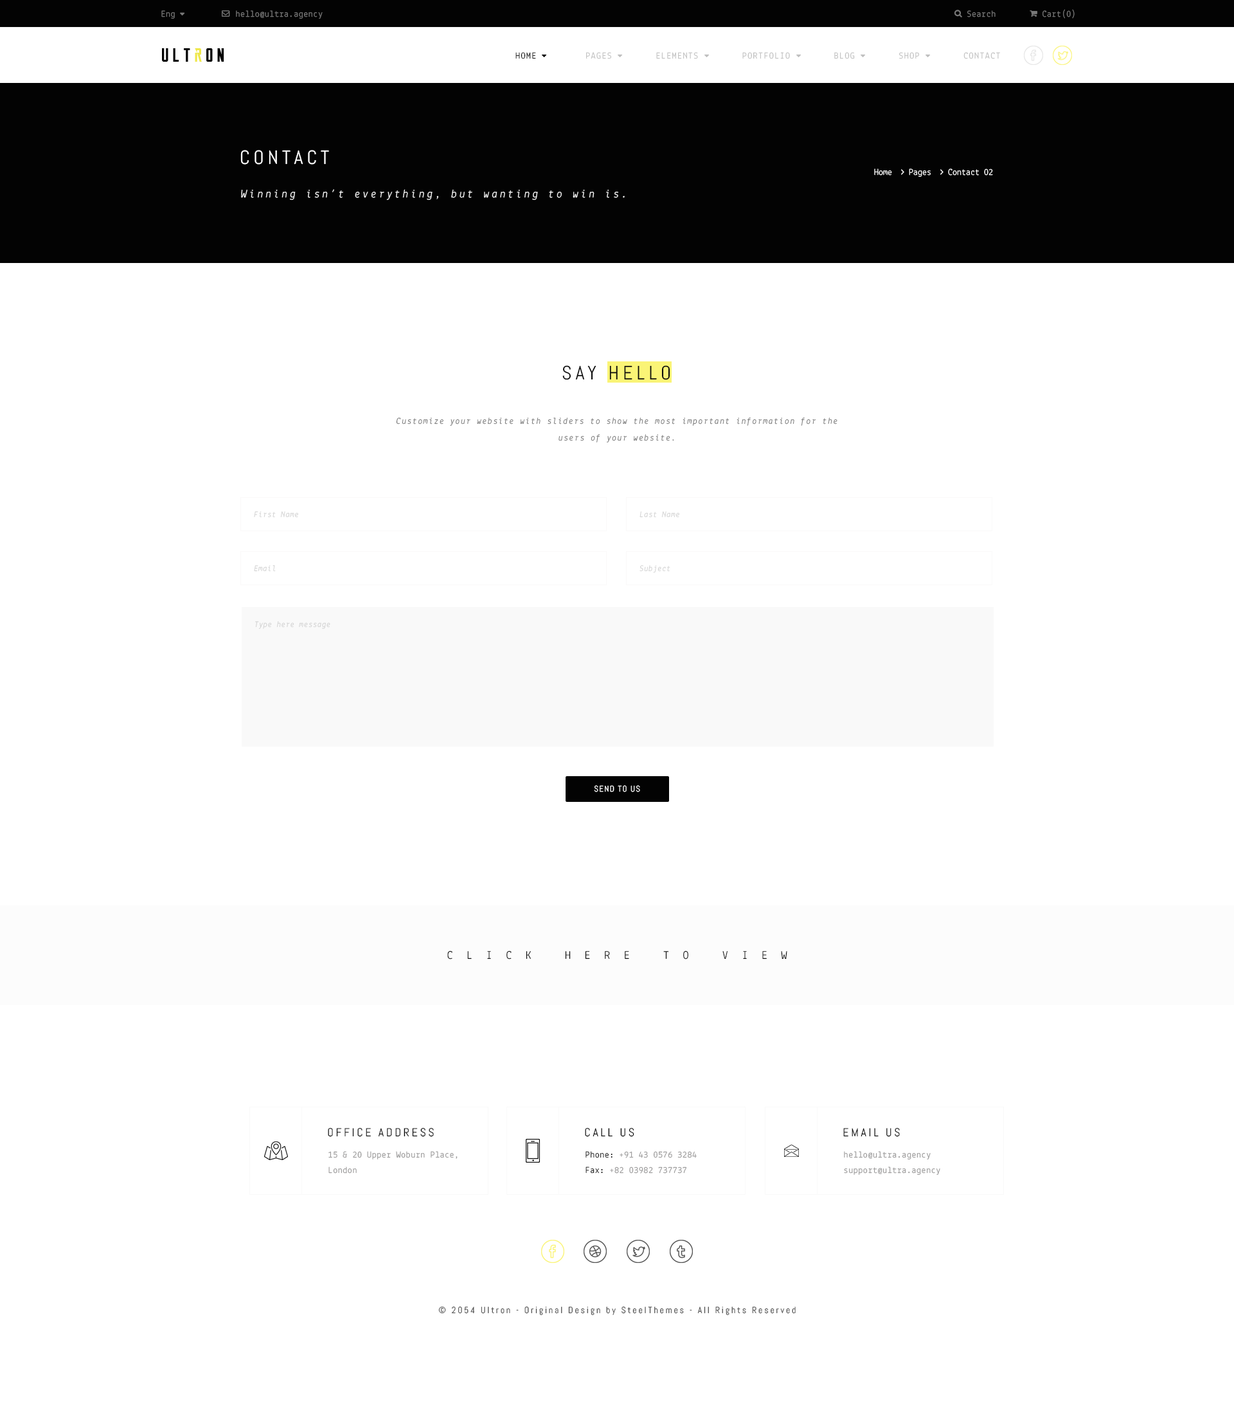
<style>
.page{position:relative;width:1234px;height:1416px;background:#ffffff}
.page>*{position:absolute;margin:0}
.t1{font:9px "Lekton-Regular";letter-spacing:0.04em;color:#787878}
.t2{font:9px "Lekton-Regular";letter-spacing:0.1em;color:#bfbfbf;text-transform:uppercase}
.t3{font:9px "Lekton-Regular";letter-spacing:0.1em;color:#030303;text-transform:uppercase}
.t4{font:19.3px "Abel-Regular";letter-spacing:0.2em;color:#ffffff;text-transform:uppercase}
.t5{font:11.6px "Lekton-Italic";letter-spacing:0.2em;color:#ffffff}
.t6{font:19.3px "Abel-Regular";letter-spacing:0.2em;color:#0b0b0b;text-transform:uppercase}
.t7{font:9px/16.7px "Lekton-Italic";letter-spacing:0.1em;color:#787878}
.t8{font:8.4px "Lekton-Italic";letter-spacing:0.04em;color:#d2d2d2}
.t9{font:8.4px "Abel-Regular";letter-spacing:0.1em;color:#ffffff;text-transform:uppercase}
.t10{font:11.6px "Lekton-Regular";letter-spacing:1.2em;color:#030303;text-transform:uppercase}
.t11{font:11.6px "Abel-Regular";letter-spacing:0.2em;color:#030303;text-transform:uppercase}
.t12{font:9px/15.4px "Lekton-Regular";letter-spacing:0.04em;color:#969595}
.t13{font:9px/15.4px "Lekton-Regular";letter-spacing:0.04em;color:#030303}
.t14{font:9px "Abel-Regular";letter-spacing:0.2em;color:#4f4f4f}
</style>
<div class="page">
<p class="t1" style="left:161px;top:10px;width:14px;height:9px">Eng</p>
<p class="t1" style="left:236px;top:10px;width:87px;height:9px">hello@ultra.agency</p>
<p class="t1" style="left:968px;top:10px;width:28px;height:7px">Search</p>
<p class="t1" style="left:1043px;top:9px;width:32px;height:10px">Cart(0)</p>
<p class="t2" style="left:516px;top:52px;width:484px;height:7px"><span class="t3">Home         </span>Pages        Elements        Portfolio        Blog        Shop        Contact</p>
<p class="t4" style="left:240px;top:150px;width:89px;height:15px">contact</p>
<p class="t5" style="left:241px;top:189px;width:384px;height:11px">Winning isn’t everything, but wanting to win is.</p>
<p class="t6" style="left:562px;top:365px;width:108px;height:15px">Say Hello</p>
<p class="t7" style="left:396px;top:417px;width:442px;height:25px;text-align:center">Customize your website with sliders to show the most important information for the users of your website.</p>
<p class="t8" style="left:254px;top:511px;width:44px;height:7px">First Name</p>
<p class="t8" style="left:640px;top:511px;width:40px;height:7px">Last Name</p>
<p class="t8" style="left:254px;top:565px;width:22px;height:7px">Email</p>
<p class="t8" style="left:640px;top:565px;width:30px;height:8px">Subject</p>
<p class="t8" style="left:255px;top:621px;width:75px;height:8px">Type here message</p>
<p class="t9" style="left:594px;top:785px;width:46px;height:7px">Send to us</p>
<p class="t10" style="left:447px;top:950px;width:341px;height:9px">Click here to view</p>
<p class="t11" style="left:328px;top:1128px;width:106px;height:9px">Office Address</p>
<p class="t11" style="left:585px;top:1128px;width:49px;height:9px">Call us</p>
<p class="t11" style="left:843px;top:1128px;width:57px;height:9px">Email us</p>
<p class="t12" style="left:328px;top:1151px;width:130px;height:22px">15 &amp; 20 Upper Woburn Place,<br>London</p>
<p class="t12" style="left:586px;top:1151px;width:111px;height:22px"><span class="t13">Phone:</span> +91 43 0576 3284<br><span class="t13">Fax:</span> +82 03982 737737</p>
<p class="t12" style="left:844px;top:1151px;width:97px;height:23px">hello@ultra.agency<br>support@ultra.agency</p>
<p class="t14" style="left:438px;top:1306px;width:358px;height:9px">© 2054 Ultron - Original Design by SteelThemes - All Rights Reserved</p>
</div>
